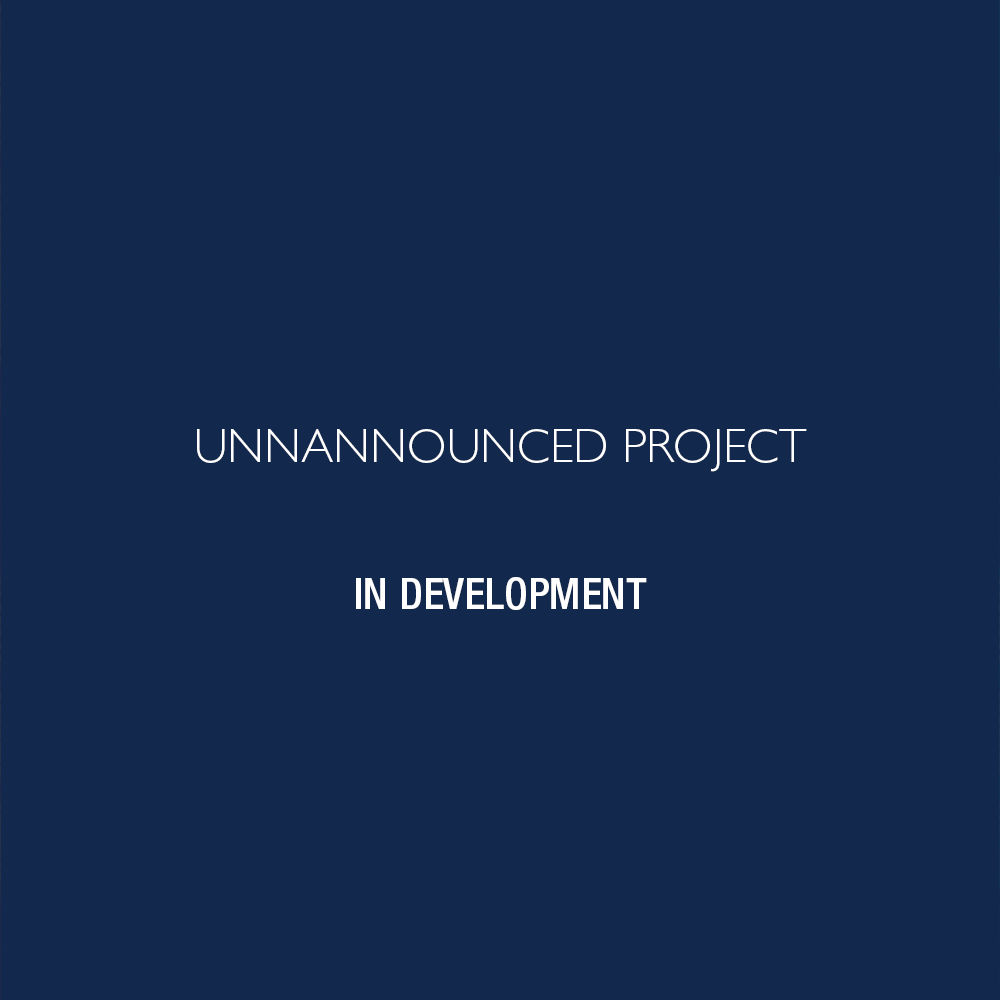
<style>
.page{position:relative;width:1000px;height:1000px;background:#12284c}
.page>*{position:absolute;margin:0}
.t1{font:48px "GillSans-Light";color:#ffffff}
.t2{font:43.1px "HelveticaNeue-MediumCond";color:#ffffff;text-transform:uppercase}
</style>
<div class="page">
<p class="t1" style="left:197px;top:429px;width:610px;height:43px">UNNANNOUNCED PROJECT</p>
<p class="t2" style="left:356px;top:577px;width:291px;height:33px">in DEVELOPMENT</p>
</div>
